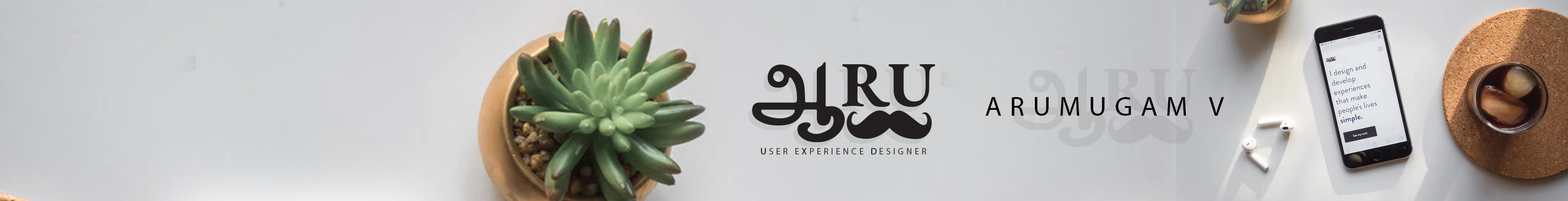
<style>
.page{position:relative;width:1568px;height:201px}
.page>*{position:absolute;margin:0}
.t1{font:27.4px "MyriadPro-Regular";letter-spacing:0.3em;color:#000000;text-transform:uppercase}
.t2{font:8.8px "MyriadPro-Regular";letter-spacing:0.3em;color:#3b3b3b;text-transform:uppercase}
.t3{font:8.8px "MyriadPro-Regular";letter-spacing:0.3em;color:#000000;text-transform:uppercase}
</style>
<div class="page">
<p class="t1" style="left:985px;top:97px;width:239px;height:19px">Arumugam V</p>
<p class="t2" style="left:761px;top:148px;width:166px;height:6px"><span class="t3">U</span>ser E<span class="t3">x</span>perience <span class="t3">D</span>esigner</p>
</div>
